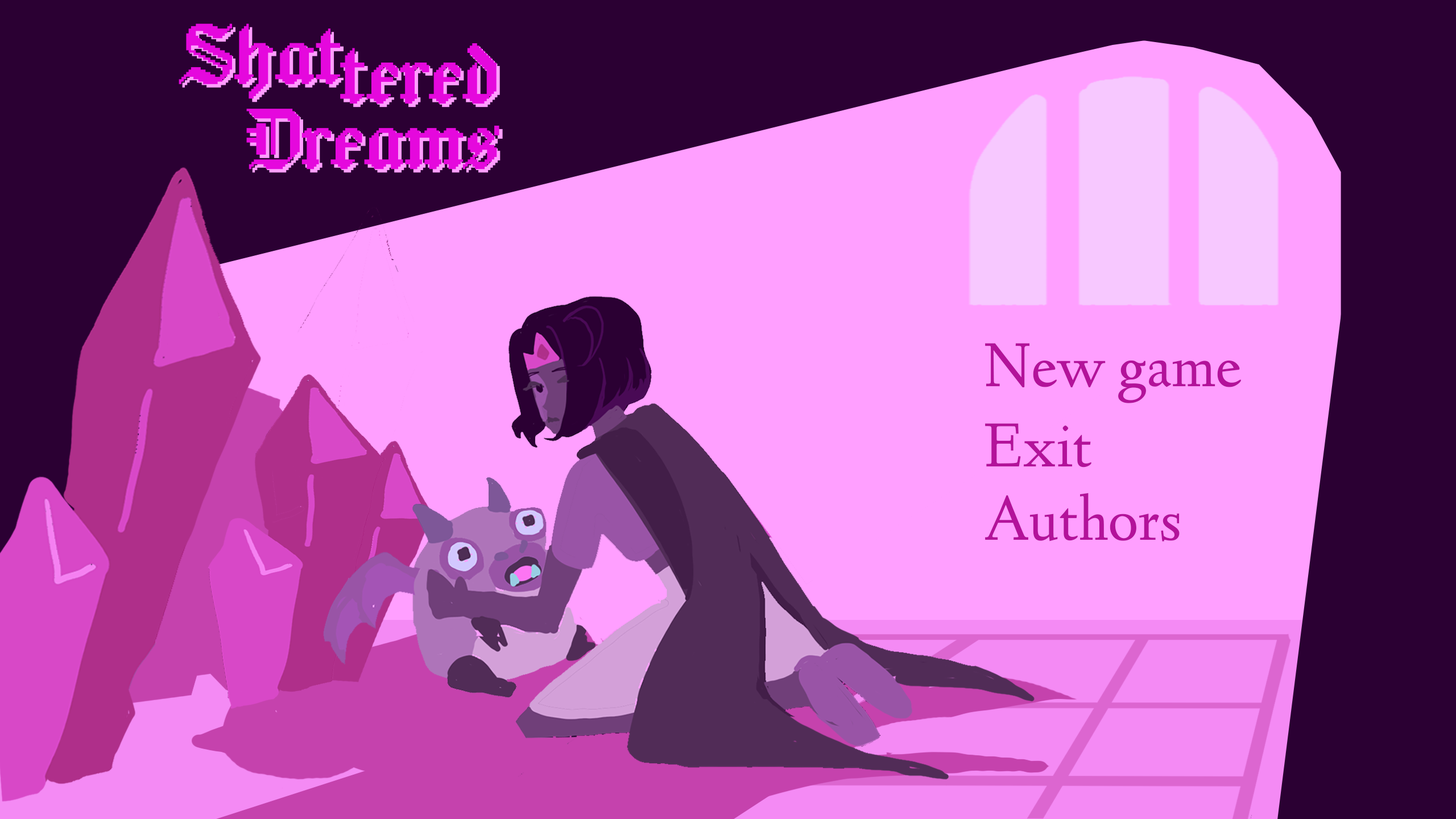
<style>
.page{position:relative;width:1456px;height:819px;background:#ff9fff}
.page>*{position:absolute;margin:0}
.t1{font:64.5px "LindenHill-Regular";color:#b3129a}
</style>
<div class="page">
<p class="t1" style="left:985px;top:343px;width:256px;height:60px">New game</p>
<p class="t1" style="left:985px;top:423px;width:106px;height:45px">Exit</p>
<p class="t1" style="left:985px;top:493px;width:195px;height:48px">Authors</p>
</div>
